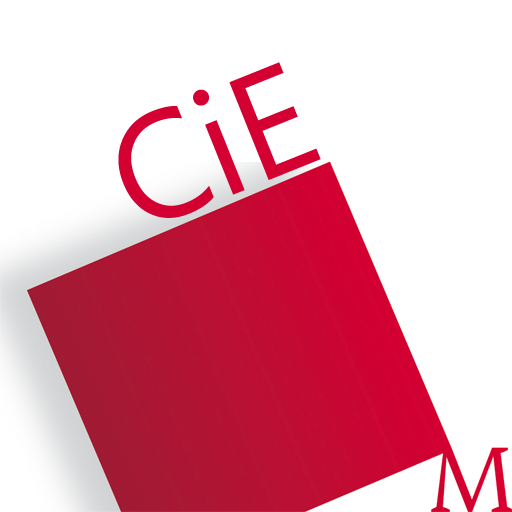
<style>
.page{position:relative;width:512px;height:512px;background:#ffffff}
.page>*{position:absolute;margin:0}
.t1{font:150px "SegoeUIHistoric";color:#d30031}
</style>
<div class="page">
<p class="t1" style="left:118px;top:62px;width:203px;height:156px;rotate:-22deg">CiE</p>
</div>
